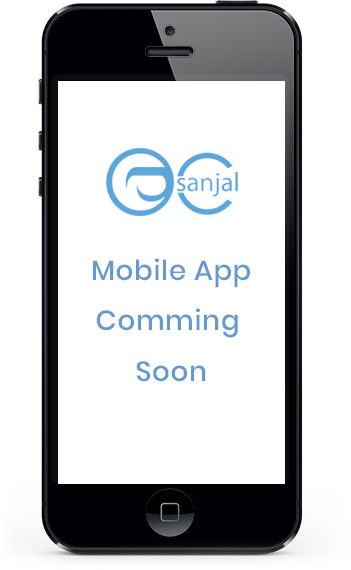
<style>
.page{position:relative;width:351px;height:570px;background:#ffffff}
.page>*{position:absolute;margin:0}
.t1{font:27.6px/50.7px "Poppins-Medium";letter-spacing:0.025em;color:#6699cc}
</style>
<div class="page">
<p class="t1" style="left:93px;top:258px;width:157px;height:124px;text-align:center">Mobile App<br>Comming <br>Soon</p>
</div>
